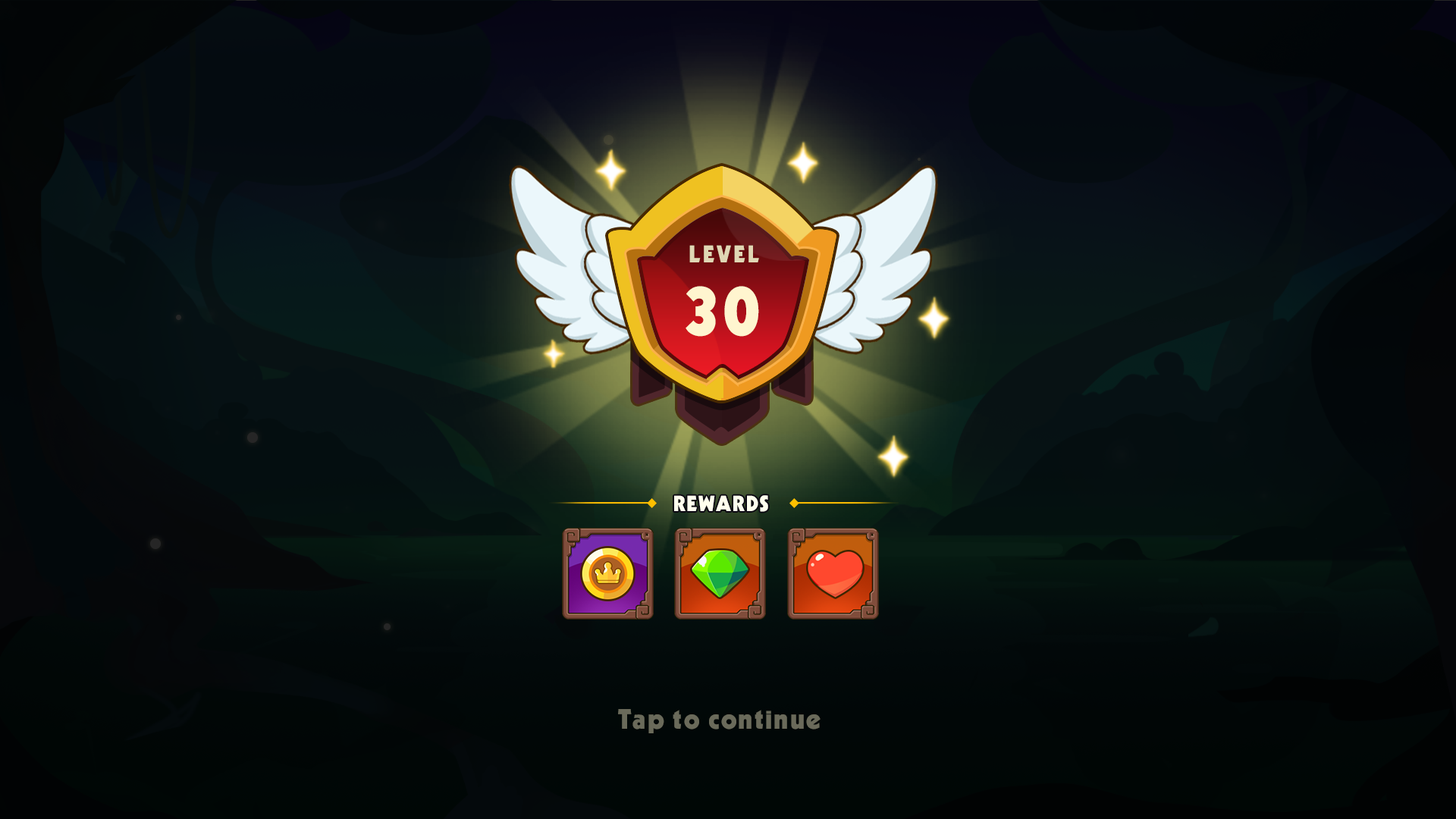
<style>
.page{position:relative;width:1456px;height:819px}
.page>*{position:absolute;margin:0}
.t1{font:23.4px "UTM-Kabel-KT";letter-spacing:0.1em;color:#e0d7b4;text-transform:uppercase}
.t2{font:70.3px "UTM-Kabel-KT";letter-spacing:0.075em;color:#fff5cf;text-transform:uppercase}
.t3{font:21.4px "UTM-Kabel-KT";letter-spacing:0.06em;color:#ffffee}
.t4{font:27.3px "UTM-Kabel-KT";letter-spacing:0.06em;color:#6a6a5a}
</style>
<div class="page">
<p class="t1" style="left:689px;top:245px;width:70px;height:17px">level</p>
<p class="t2" style="left:686px;top:286px;width:73px;height:51px">30</p>
<p class="t3" style="left:674px;top:495px;width:94px;height:17px">REWARDS</p>
<p class="t4" style="left:618px;top:709px;width:203px;height:24px">Tap to continue</p>
</div>
